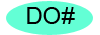
<style>
.page{position:relative;width:100px;height:35px;background:#63ffd5}
.page>*{position:absolute;margin:0}
.t1{font:24px "ArialMT";color:#000000}
</style>
<div class="page">
<p class="t1" style="left:27px;top:7px;width:48px;height:17px">DO#</p>
</div>
